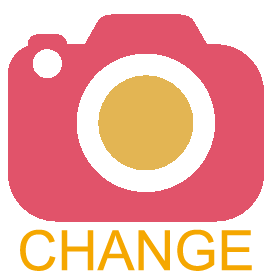
<style>
.page{position:relative;width:276px;height:280px;background:#ffffff}
.page>*{position:absolute;margin:0}
.t1{font:84.6px "CordiaUPC-Bold";color:#f6a800}
</style>
<div class="page">
<p class="t1" style="left:20px;top:229px;width:232px;height:42px">CHANGE</p>
</div>
